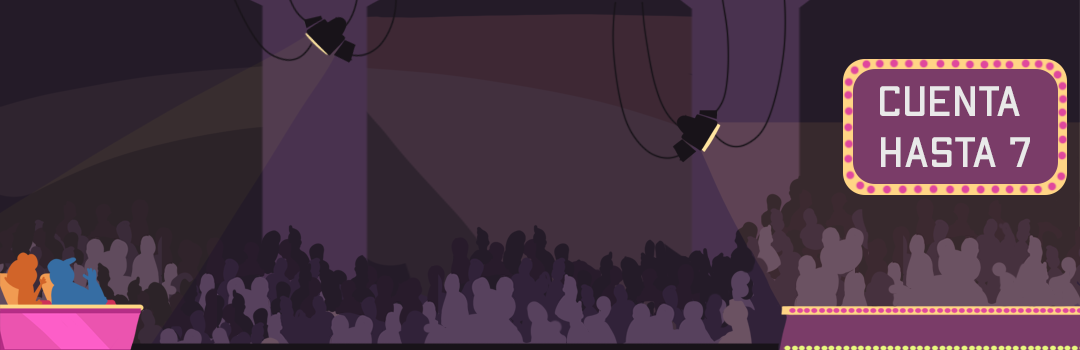
<style>
.page{position:relative;width:1080px;height:350px}
.page>*{position:absolute;margin:0}
.t1{font:42.6px "ApexMk2-Regular";color:#e9e9e9}
</style>
<div class="page">
<p class="t1" style="left:880px;top:86px;width:150px;height:81px;text-align:center">cuenta <br>hasta 7</p>
</div>
